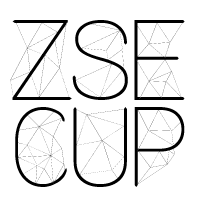
<style>
.page{position:relative;width:200px;height:200px;background:#ffffff}
.page>*{position:absolute;margin:0}
.t1{font:80px/8px "Amethyst";letter-spacing:-0.26em;color:#000000}
.t2{font:80px/87px "Amethyst";letter-spacing:-0.26em;color:#000000}
</style>
<div class="page">
<p class="t1" style="left:10px;top:20px;width:175px;height:167px">ZSE<br><span class="t2">cup</span></p>
</div>
